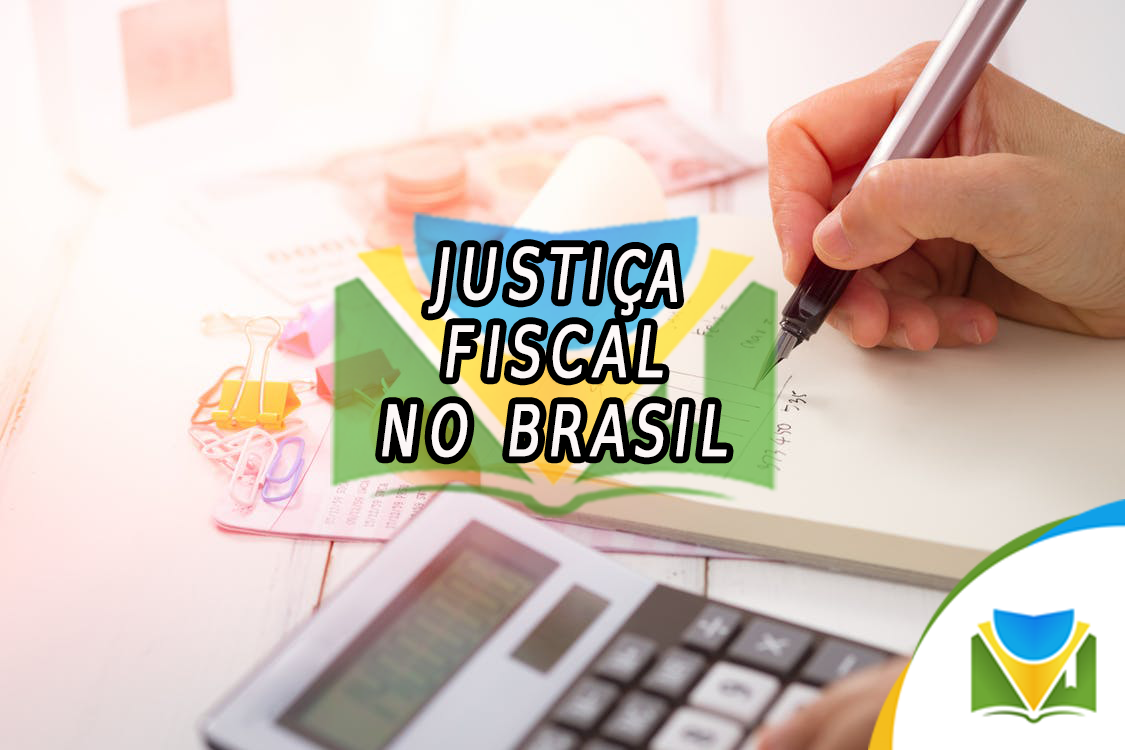
<style>
.page{position:relative;width:1125px;height:750px}
.page>*{position:absolute;margin:0}
.t1{font:70px/39.3px "Chandas";letter-spacing:0.1em;color:#fdf8f8;text-transform:uppercase;font-weight:bold;font-style:italic;scale:0.7 1}
.t2{font:70px/39.3px "Tahoma";letter-spacing:0.1em;color:#fdf8f8;text-transform:uppercase;font-weight:bold;font-style:italic;scale:0.7 1}
</style>
<div class="page">
<p class="t1" style="left:382px;top:246px;width:345px;height:212px;text-align:center">JUSTI<span class="t2">ÇA</span> <br><br>FISCAL <br><br>NO bRASIL</p>
</div>
